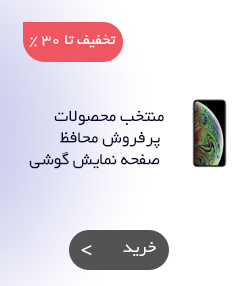
<style>
.page{position:relative;width:246px;height:286px;background:#ffffff}
.page>*{position:absolute;margin:0}
.t1{font:16px "Calibri";color:#ffffff}
.t2{font:16px "BYekan";color:#ffffff}
.t3{font:18px "BYekan";color:#06062b}
.t4{font:18px "Tahoma";color:#ffffff}
.t5{font:18px "BYekan";color:#ffffff}
</style>
<div class="page">
<p class="t1" style="left:29px;top:36px;width:9px;height:11px">%</p>
<p class="t2" style="left:42px;top:34px;width:74px;height:14px">تخفیف تا 30</p>
<p class="t3" style="left:29px;top:110px;width:135px;height:59px">منتخب محصولات<br> پرفروش محافظ<br> صفحه نمایش گوشی</p>
<p class="t4" style="left:81px;top:245px;width:11px;height:11px">&gt;</p>
<p class="t5" style="left:123px;top:242px;width:33px;height:14px">خرید</p>
</div>
